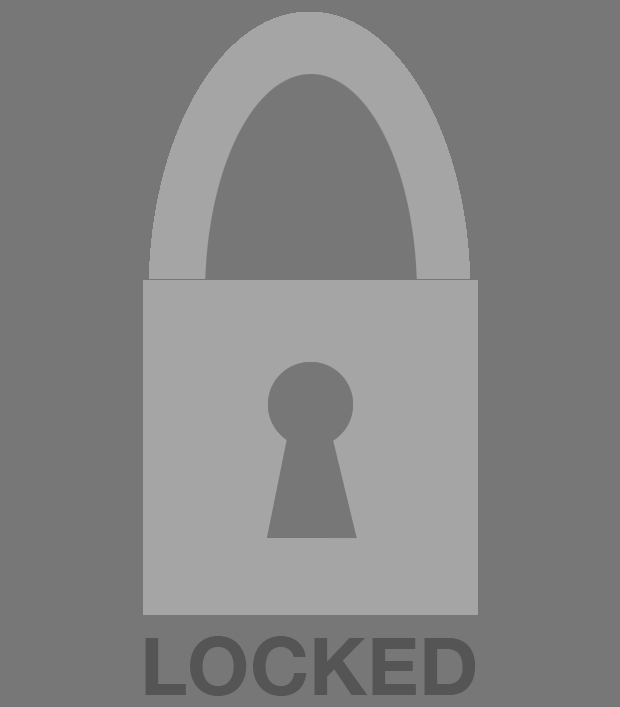
<style>
.page{position:relative;width:620px;height:707px;background:#777777}
.page>*{position:absolute;margin:0}
.t1{font:80px "HelveticaNeue-Bold";color:#555555}
</style>
<div class="page">
<p class="t1" style="left:145px;top:636px;width:331px;height:60px">LOCKED</p>
</div>
